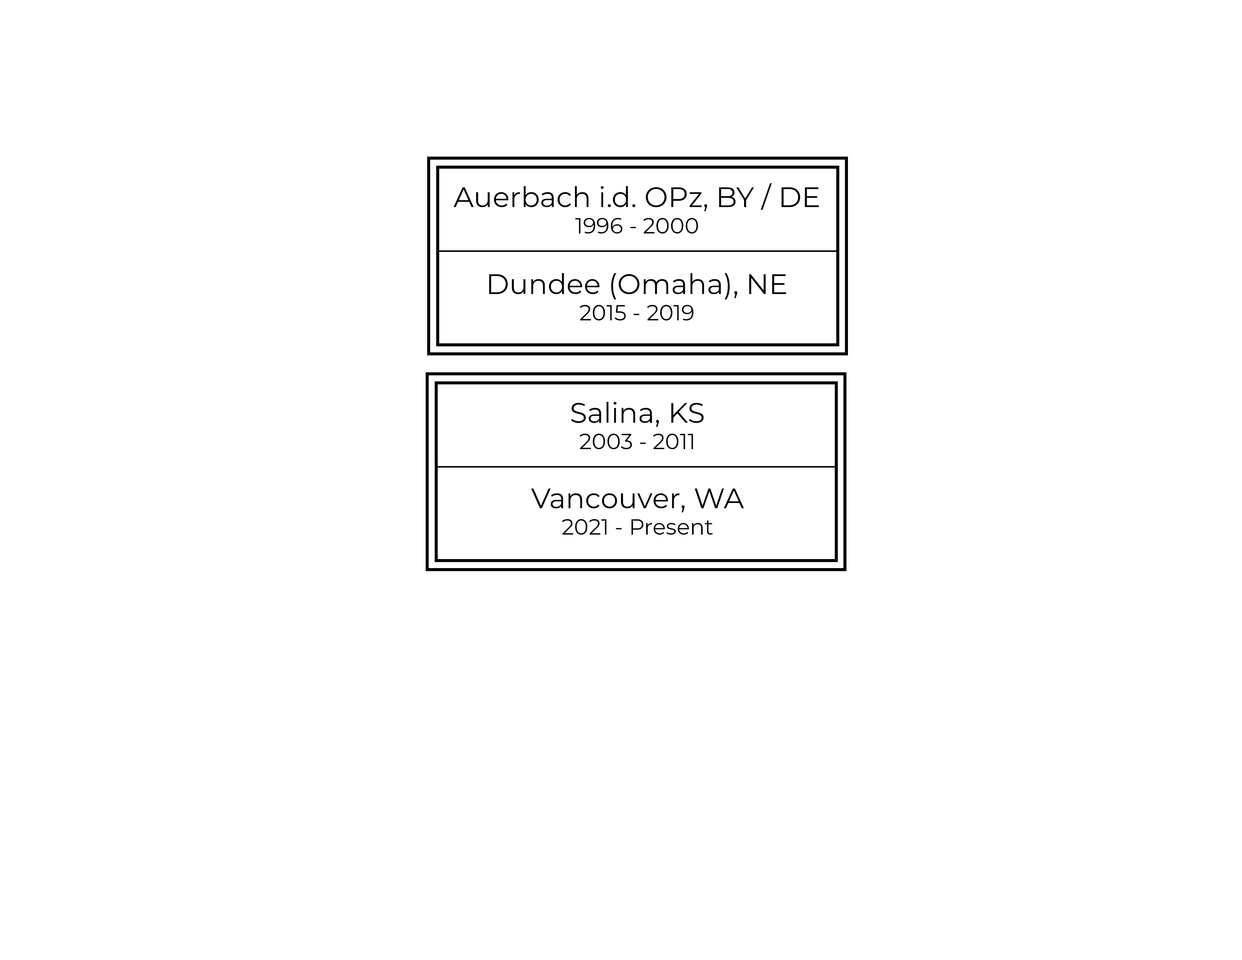
<style>
.page{position:relative;width:1242px;height:960px;background:#ffffff}
.page>*{position:absolute;margin:0}
.t1{font:28.2px "Montserrat-Regular";color:#000000}
.t2{font:22px "Montserrat-Regular";color:#000000}
</style>
<div class="page">
<p class="t1" style="left:454px;top:183px;width:365px;height:51px;text-align:center">Auerbach i.d. OPz, BY / DE<br><span class="t2">1996 - 2000</span></p>
<p class="t1" style="left:489px;top:273px;width:297px;height:48px;text-align:center">Dundee (Omaha), NE<br><span class="t2">2015 - 2019</span></p>
<p class="t2" style="left:571px;top:402px;width:133px;height:47px;text-align:center"><span class="t1">Salina, KS<br></span>2003 - 2011</p>
<p class="t2" style="left:531px;top:488px;width:213px;height:47px;text-align:center"><span class="t1">Vancouver, WA<br></span>2021 - Present</p>
</div>
